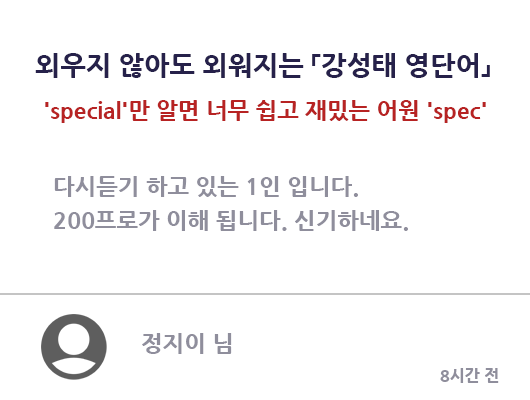
<style>
.page{position:relative;width:530px;height:400px;background:#ffffff}
.page>*{position:absolute;margin:0}
.t1{font:27px "NanumGothicExtraBold";color:#26214a}
.t2{font:23px "NanumGothicExtraBold";color:#b72323}
.t3{font:23px/34px "NanumGothicExtraBold";color:#8f8e9c}
.t4{font:23px "NanumGothicExtraBold";color:#8f8e9c}
.t5{font:16px "NanumGothicExtraBold";color:#8f8e9c}
</style>
<div class="page">
<p class="t1" style="left:35px;top:53px;width:455px;height:25px">외우지 않아도 외워지는 「강성태 영단어」</p>
<p class="t2" style="left:45px;top:100px;width:441px;height:23px">'special'만 알면 너무 쉽고 재밌는 어원 'spec'</p>
<p class="t3" style="left:54px;top:176px;width:354px;height:55px">다시듣기 하고 있는 1인 입니다. <br>200프로가 이해 됩니다. 신기하네요.</p>
<p class="t4" style="left:142px;top:333px;width:90px;height:21px">정지이 님</p>
<p class="t5" style="left:440px;top:368px;width:59px;height:15px">8시간 전</p>
</div>
